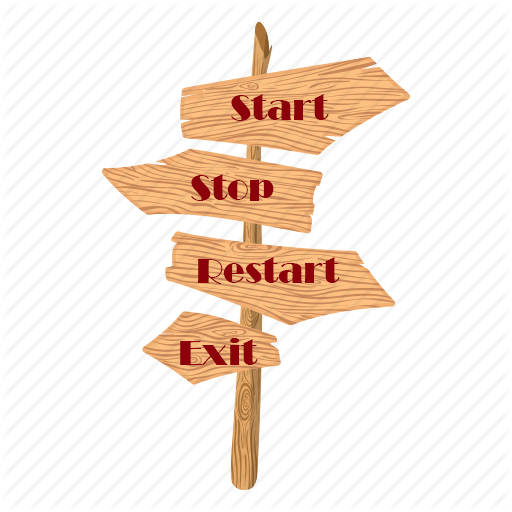
<style>
.page{position:relative;width:512px;height:512px;background:#ffffff}
.page>*{position:absolute;margin:0}
.t1{font:36px "Broadway";color:#8c010a}
</style>
<div class="page">
<p class="t1" style="left:231px;top:94px;width:98px;height:27px">Start</p>
<p class="t1" style="left:191px;top:174px;width:83px;height:27px">Stop</p>
<p class="t1" style="left:198px;top:257px;width:142px;height:27px">Restart</p>
<p class="t1" style="left:180px;top:338px;width:78px;height:27px">Exit</p>
</div>
